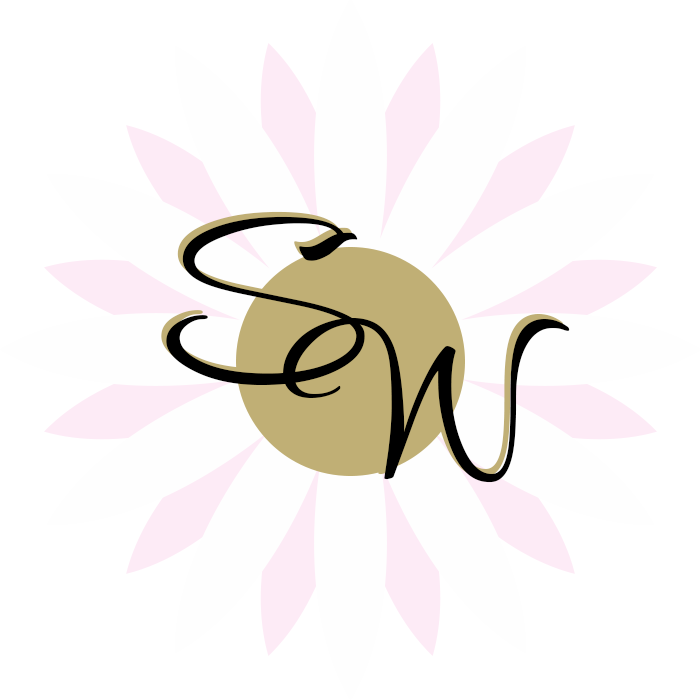
<style>
.page{position:relative;width:700px;height:700px;background:#ffffff}
.page>*{position:absolute;margin:0}
.t1{font:192px "KonTikiEnchantedJF";scale:1.09 1}
.t2{font:192px "KonTikiEnchantedJF";color:#000000;scale:1.09 1}
</style>
<div class="page">
<p class="t1" style="left:161px;top:211px;width:199px;height:169px">S</p>
<p class="t2" style="left:166px;top:216px;width:199px;height:169px">S</p>
<p class="t1" style="left:277px;top:313px;width:287px;height:165px">W</p>
<p class="t2" style="left:283px;top:318px;width:287px;height:165px">W</p>
</div>
